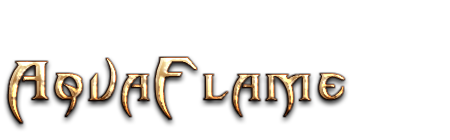
<style>
.page{position:relative;width:450px;height:140px;background:#ffffff}
.page>*{position:absolute;margin:0}
.t1{font:110px "Blade2-Regular";letter-spacing:0.05em;font-variant:small-caps;font-weight:bold;scale:0.9 1}
</style>
<div class="page">
<p class="t1" style="left:7px;top:57px;width:338px;height:67px">AquaFlame</p>
</div>
